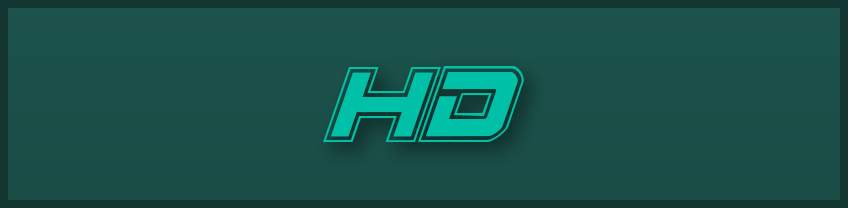
<style>
.page{position:relative;width:848px;height:208px}
.page>*{position:absolute;margin:0}
.t1{font:150px "SpaceRangerAcademyItalic";color:#00c0a7}
</style>
<div class="page">
<p class="t1" style="left:323px;top:66px;width:201px;height:76px">HD</p>
</div>
